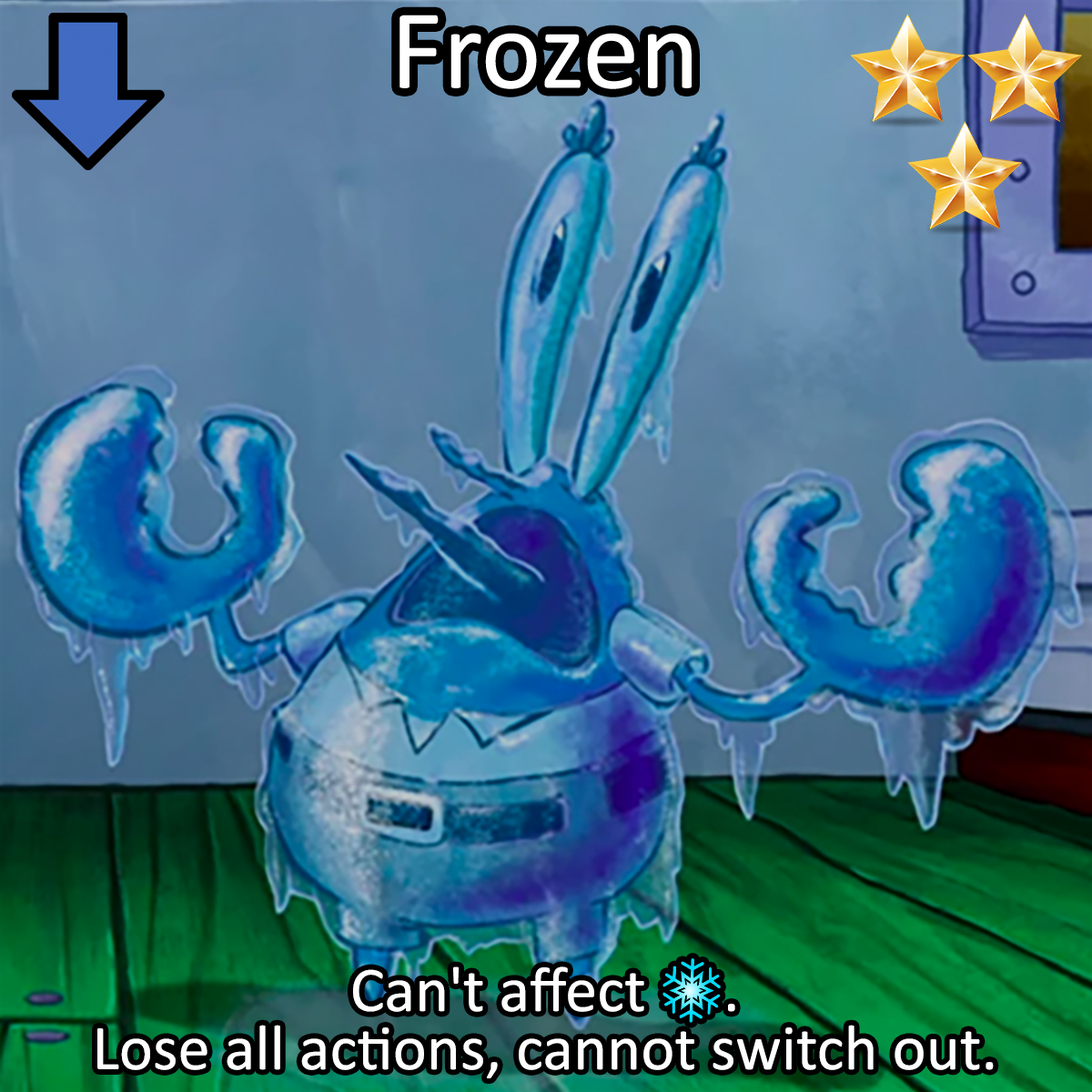
<style>
.page{position:relative;width:1092px;height:1092px}
.page>*{position:absolute;margin:0}
.t1{font:196.6px "Calibri";color:#ffffff}
.t2{font:110.1px/58.2px "Calibri";color:#ffffff}
.t3{font:110.1px/58.2px "stoogedings-Regular";color:#ffffff}
</style>
<div class="page">
<p class="t1" style="left:399px;top:15px;width:293px;height:74px">Frozen</p>
<p class="t2" style="left:97px;top:958px;width:897px;height:120px;text-align:center">Can't affect <span class="t3">[ice]</span>.<br>Lose all actions, cannot switch out.</p>
</div>
